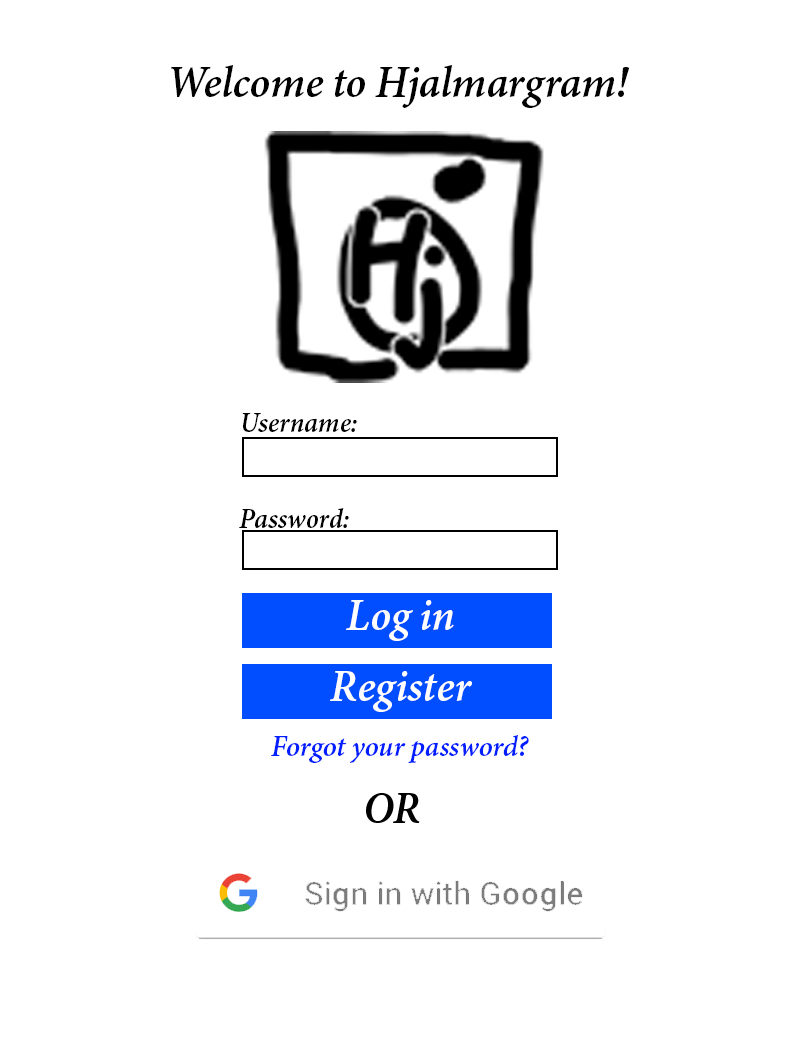
<style>
.page{position:relative;width:800px;height:1061px;background:#ffffff}
.page>*{position:absolute;margin:0}
.t1{font:48px "AdobeDevanagari-BoldItalic";letter-spacing:-0.01em;color:#000000}
.t2{font:30px "AdobeDevanagari-BoldItalic";letter-spacing:-0.01em;color:#000000}
.t3{font:48px "AdobeDevanagari-BoldItalic";letter-spacing:-0.01em;color:#ffffff}
.t4{font:31.5px "AdobeDevanagari-BoldItalic";letter-spacing:-0.01em;color:#001eff}
</style>
<div class="page">
<p class="t1" style="left:171px;top:65px;width:458px;height:43px">Welcome to Hjalmargram!</p>
<p class="t2" style="left:242px;top:413px;width:115px;height:19px">Username:</p>
<p class="t2" style="left:239px;top:508px;width:110px;height:20px">Password:</p>
<p class="t3" style="left:346px;top:600px;width:108px;height:41px">Log in</p>
<p class="t3" style="left:330px;top:671px;width:142px;height:41px">Register</p>
<p class="t4" style="left:271px;top:735px;width:258px;height:28px">Forgot your password?</p>
</div>
